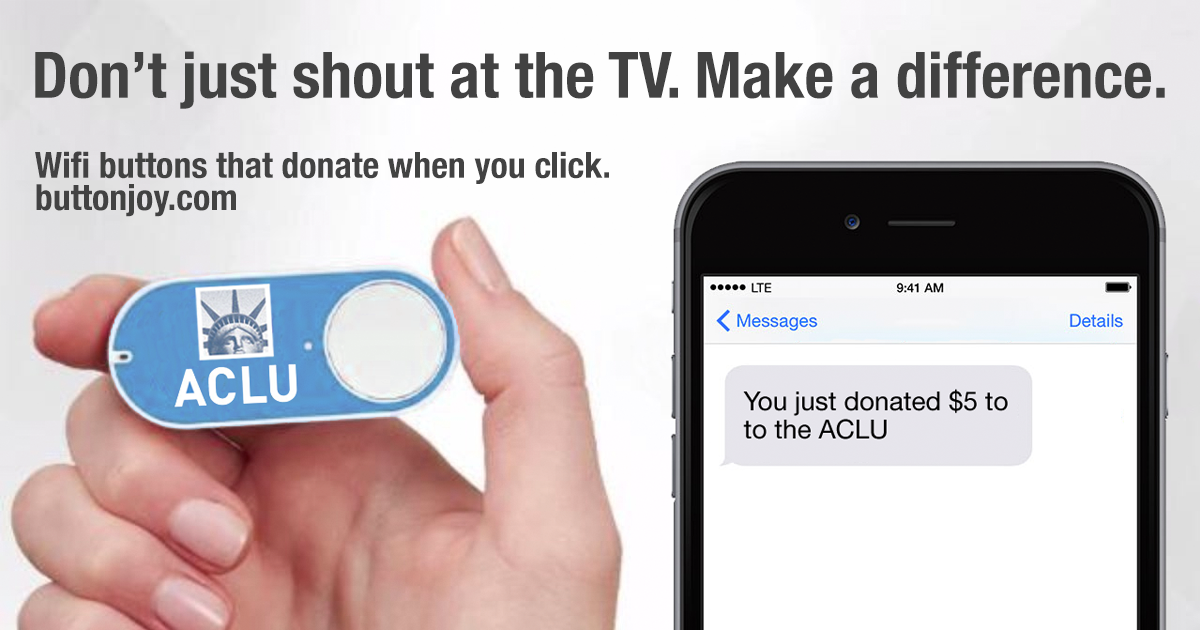
<style>
.page{position:relative;width:1200px;height:630px}
.page>*{position:absolute;margin:0}
.t1{font:64px "HelveticaNeue-CondensedBold";color:#424242}
.t2{font:36px "HelveticaNeue-CondensedBold";color:#424242}
</style>
<div class="page">
<p class="t1" style="left:35px;top:51px;width:1130px;height:58px">Don’t just shout at the TV. Make a difference.</p>
<p class="t2" style="left:35px;top:151px;width:574px;height:33px">Wifi buttons that donate when you click.</p>
<p class="t2" style="left:36px;top:184px;width:200px;height:33px">buttonjoy.com</p>
</div>
